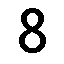
<style>
.page{position:relative;width:64px;height:64px;background:#ffffff}
.page>*{position:absolute;margin:0}
.t1{font:60px "MicrosoftSansSerif";color:#000000}
</style>
<div class="page">
<p class="t1" style="left:19px;top:8px;width:27px;height:45px">8</p>
</div>
